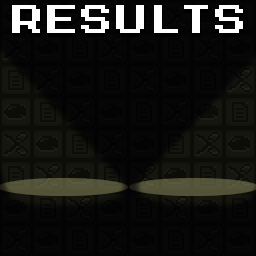
<style>
.page{position:relative;width:256px;height:256px;background:#060606}
.page>*{position:absolute;margin:0}
.t1{font:32px "MegaMan-2";letter-spacing:0.075em;color:#ffffff}
</style>
<div class="page">
<p class="t1" style="left:12px;top:5px;width:231px;height:28px">RESULTS</p>
</div>
